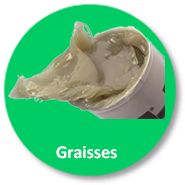
<style>
.page{position:relative;width:185px;height:185px;background:#00cc66}
.page>*{position:absolute;margin:0}
.t1{font:18px "Calibri-Bold";color:#ffffff}
</style>
<div class="page">
<p class="t1" style="left:56px;top:146px;width:61px;height:13px">Graisses</p>
</div>
